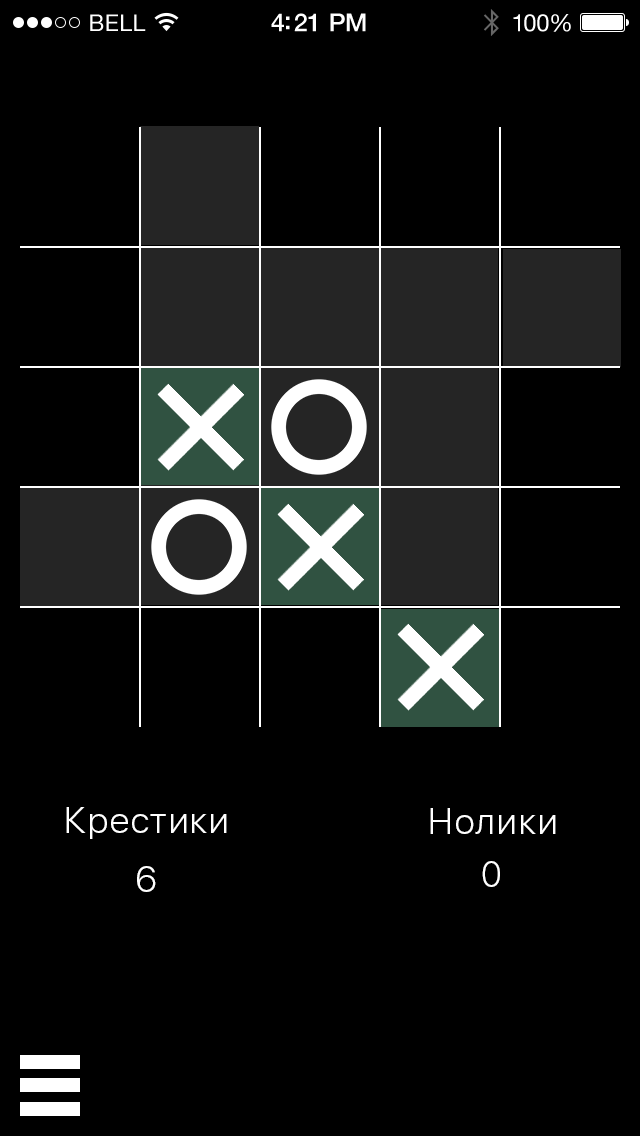
<style>
.page{position:relative;width:640px;height:1136px;background:#000000}
.page>*{position:absolute;margin:0}
.t1{font:23px "HelveticaNeue";letter-spacing:0.02em;color:#ffffff}
.t2{font:25px "HelveticaNeue-Medium";letter-spacing:-0.02em;color:#ffffff}
.t3{font:24px "HelveticaNeue";letter-spacing:-0.02em;color:#ffffff}
.t4{font:36px "SFUIText-Light";color:#ffffff}
</style>
<div class="page">
<p class="t1" style="left:90px;top:14px;width:56px;height:17px">BELL</p>
<p class="t2" style="left:271px;top:13px;width:95px;height:19px">4:21 PM</p>
<p class="t3" style="left:513px;top:14px;width:58px;height:18px">100%</p>
<p class="t4" style="left:66px;top:807px;width:161px;height:32px">Крестики</p>
<p class="t4" style="left:430px;top:808px;width:126px;height:26px">Нолики</p>
<p class="t4" style="left:137px;top:866px;width:19px;height:26px">6</p>
<p class="t4" style="left:482px;top:861px;width:18px;height:26px">0</p>
</div>
